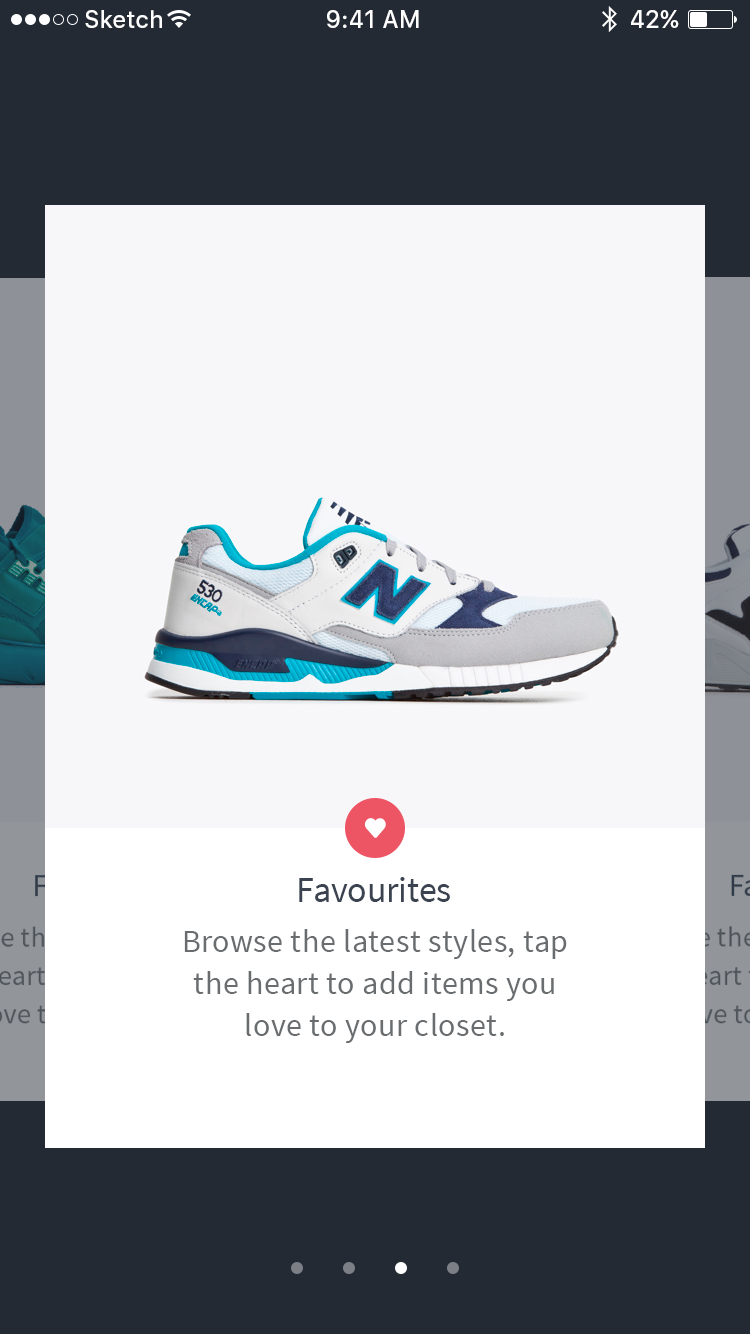
<style>
.page{position:relative;width:750px;height:1334px;background:#f7f7f9}
.page>*{position:absolute;margin:0}
.t1{font:24px "SFUIText-Medium";color:#ffffff}
.t2{font:36px "SourceSansPro-Regular";letter-spacing:-0.005em;color:#3c4350}
.t3{font:32px/42px "SourceSansPro-Regular";letter-spacing:0.015em;color:#696d6f}
</style>
<div class="page">
<p class="t1" style="left:85px;top:10px;width:77px;height:18px">Sketch</p>
<p class="t1" style="left:327px;top:10px;width:92px;height:18px">9:41 AM</p>
<p class="t1" style="left:631px;top:10px;width:48px;height:18px">42%</p>
<p class="t2" style="left:299px;top:877px;width:151px;height:25px">Favourites</p>
<p class="t3" style="left:184px;top:929px;width:383px;height:114px;text-align:center">Browse the latest styles, tap the heart to add items you love to your closet.</p>
</div>
